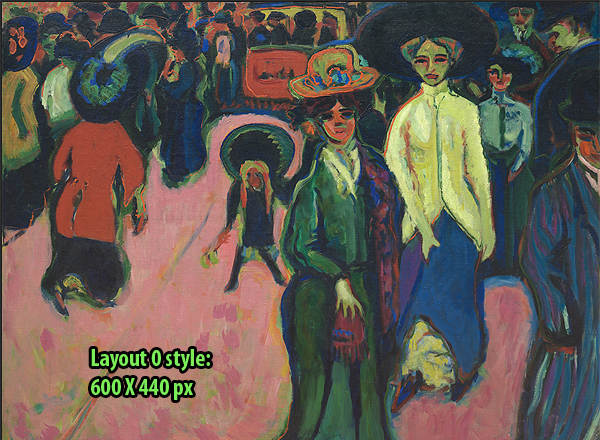
<style>
.page{position:relative;width:600px;height:440px}
.page>*{position:absolute;margin:0}
.t1{font:24px "MyriadPro-BoldCond";color:#7bed58}
</style>
<div class="page">
<p class="t1" style="left:91px;top:349px;width:119px;height:51px">Layout 0 style:<br>600 X 440 px</p>
</div>
